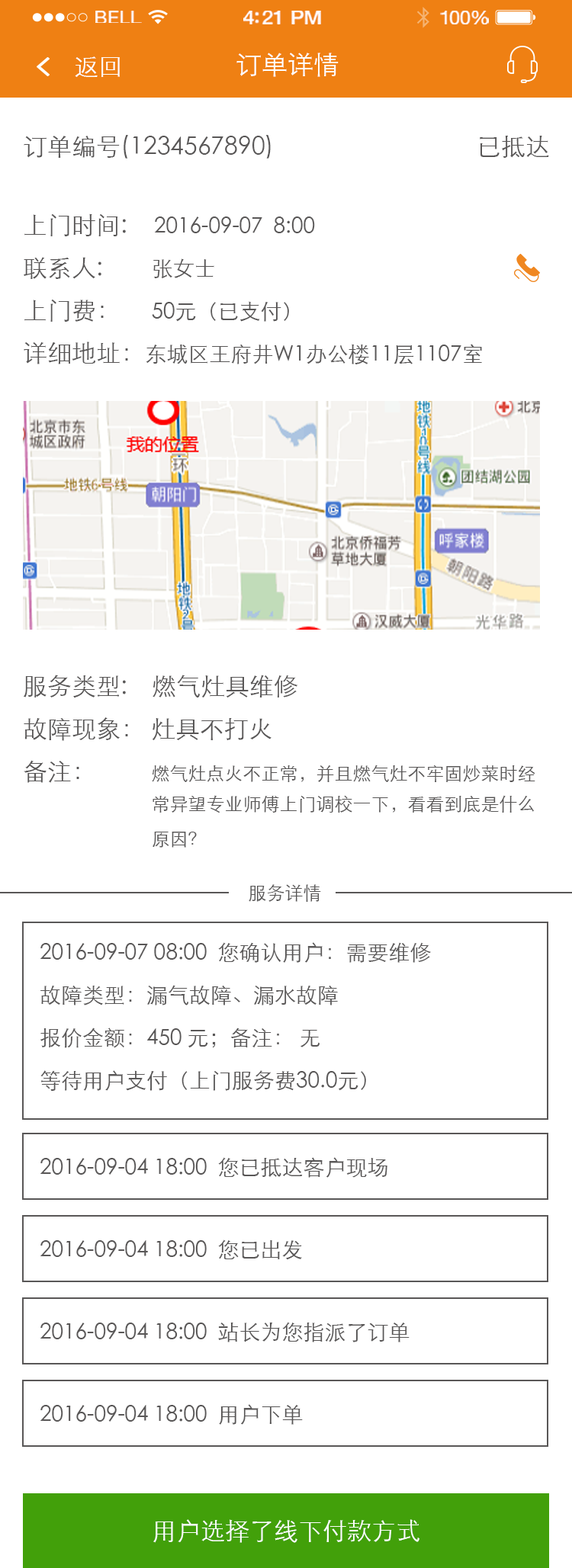
<style>
.page{position:relative;width:572px;height:1568px;background:#ffffff}
.page>*{position:absolute;margin:0}
.t1{font:17.7px "HelveticaNeue";letter-spacing:0.02em;color:#ffffff;scale:1.06 1}
.t2{font:19.3px "HelveticaNeue-Medium";letter-spacing:-0.02em;color:#ffffff;scale:1.06 1}
.t3{font:18.5px "HelveticaNeue";letter-spacing:-0.02em;color:#ffffff;scale:1.06 1}
.t4{font:25.9px "STXihei";color:#ffffff}
.t5{font:24.4px "STXihei";color:#ffffff}
.t6{font:24.4px "STXihei";color:#595757}
.t7{font:21.3px/42.7px "STXihei";color:#595757}
.t8{font:24.4px/42.7px "STXihei";color:#595757}
.t9{font:21.3px "STXihei";color:#595757}
.t10{font:18.3px/35.1px "STXihei";color:#595757}
.t11{font:24.4px/35.1px "STXihei";color:#595757}
.t12{font:18.3px/42.7px "STXihei";color:#595757}
.t13{font:18.7px "STXihei";color:#595757}
</style>
<div class="page">
<p class="t1" style="left:95px;top:11px;width:47px;height:12px">BELL</p>
<p class="t2" style="left:243px;top:11px;width:78px;height:13px">4:21 PM</p>
<p class="t3" style="left:440px;top:11px;width:49px;height:13px">100%</p>
<p class="t4" style="left:236px;top:53px;width:102px;height:24px">订单详情</p>
<p class="t5" style="left:75px;top:56px;width:45px;height:21px">返回</p>
<p class="t6" style="left:24px;top:135px;width:247px;height:24px">订单编号(1234567890)</p>
<p class="t6" style="left:479px;top:136px;width:70px;height:22px">已抵达</p>
<p class="t7" style="left:24px;top:213px;width:458px;height:151px"><span class="t8">上门时间:<br>联系人:        </span>张女士<br><span class="t8">上门费：     </span>50元（已支付）<br><span class="t8">详细地址：</span>东城区王府井W1办公楼11层1107室</p>
<p class="t9" style="left:154px;top:216px;width:161px;height:17px">2016-09-07  8:00</p>
<p class="t10" style="left:24px;top:675px;width:511px;height:173px"><span class="t8">服务类型:    燃气灶具维修<br>故障现象： 灶具不打火<br></span><span class="t11">备注：         </span>燃气灶点火不正常，并且燃气灶不牢固炒菜时经<br>                            常异望专业师傅上门调校一下，看看到底是什么<br>                            原因<span class="t12">？</span></p>
<p class="t13" style="left:249px;top:884px;width:72px;height:18px">服务详情</p>
<p class="t7" style="left:40px;top:942px;width:391px;height:149px">2016-09-07 08:00  您确认用户：需要维修<br>故障类型：漏气故障、漏水故障<br>报价金额：450 元；备注： 无<br>等待用户支付（上门服务费30.0元）</p>
<p class="t9" style="left:40px;top:1157px;width:347px;height:21px">2016-09-04 18:00  您已抵达客户现场</p>
<p class="t9" style="left:40px;top:1239px;width:262px;height:21px">2016-09-04 18:00  您已出发</p>
<p class="t9" style="left:40px;top:1322px;width:369px;height:20px">2016-09-04 18:00  站长为您指派了订单</p>
<p class="t9" style="left:40px;top:1404px;width:263px;height:21px">2016-09-04 18:00  用户下单</p>
<p class="t5" style="left:153px;top:1519px;width:266px;height:24px">用户选择了线下付款方式</p>
</div>
